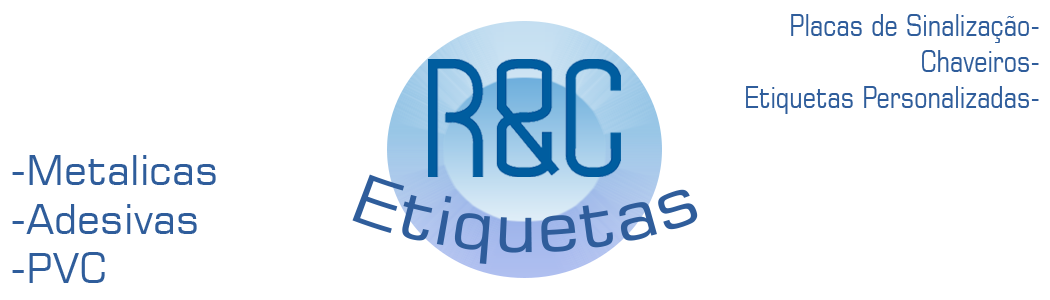
<style>
.page{position:relative;width:1050px;height:300px;background:#ffffff}
.page>*{position:absolute;margin:0}
.t1{font:29.9px "Square721BT-Roman";color:#2f5d9b;scale:0.78 1}
.t2{font:40.7px "Square721BT-Roman";color:#2f5d9b}
</style>
<div class="page">
<p class="t1" style="left:746px;top:14px;width:293px;height:100px;text-align:right">Placas de Sinalização-<br>Chaveiros-<br>Etiquetas Personalizadas-</p>
<p class="t2" style="left:12px;top:155px;width:204px;height:128px">-Metalicas<br>-Adesivas<br>-PVC</p>
</div>
